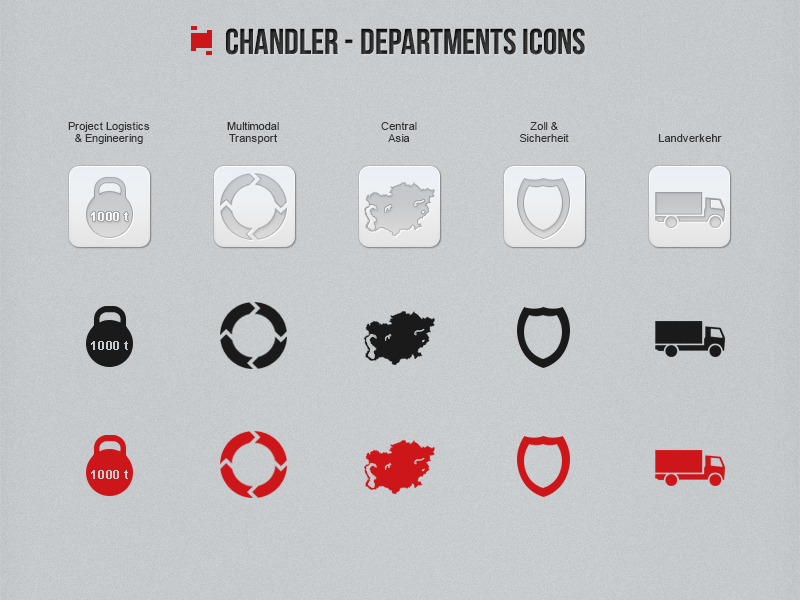
<style>
.page{position:relative;width:800px;height:600px}
.page>*{position:absolute;margin:0}
.t1{font:36px "BebasNeue";color:#353535;text-transform:uppercase}
.t2{font:11px/12px "ArialMT";letter-spacing:0.01em;color:#333333}
.t3{font:11px "ArialMT";letter-spacing:0.01em;color:#333333}
</style>
<div class="page">
<p class="t1" style="left:226px;top:28px;width:359px;height:27px">Chandler - Departments Icons</p>
<p class="t2" style="left:68px;top:122px;width:82px;height:22px;text-align:center">Project Logistics<br>&amp; Engineering</p>
<p class="t2" style="left:227px;top:122px;width:52px;height:22px;text-align:center">Multimodal<br>Transport</p>
<p class="t2" style="left:381px;top:122px;width:36px;height:20px;text-align:center">Central<br>Asia</p>
<p class="t2" style="left:519px;top:122px;width:50px;height:20px;text-align:center">Zoll &amp;<br>Sicherheit</p>
<p class="t3" style="left:658px;top:134px;width:64px;height:8px">Landverkehr</p>
</div>
